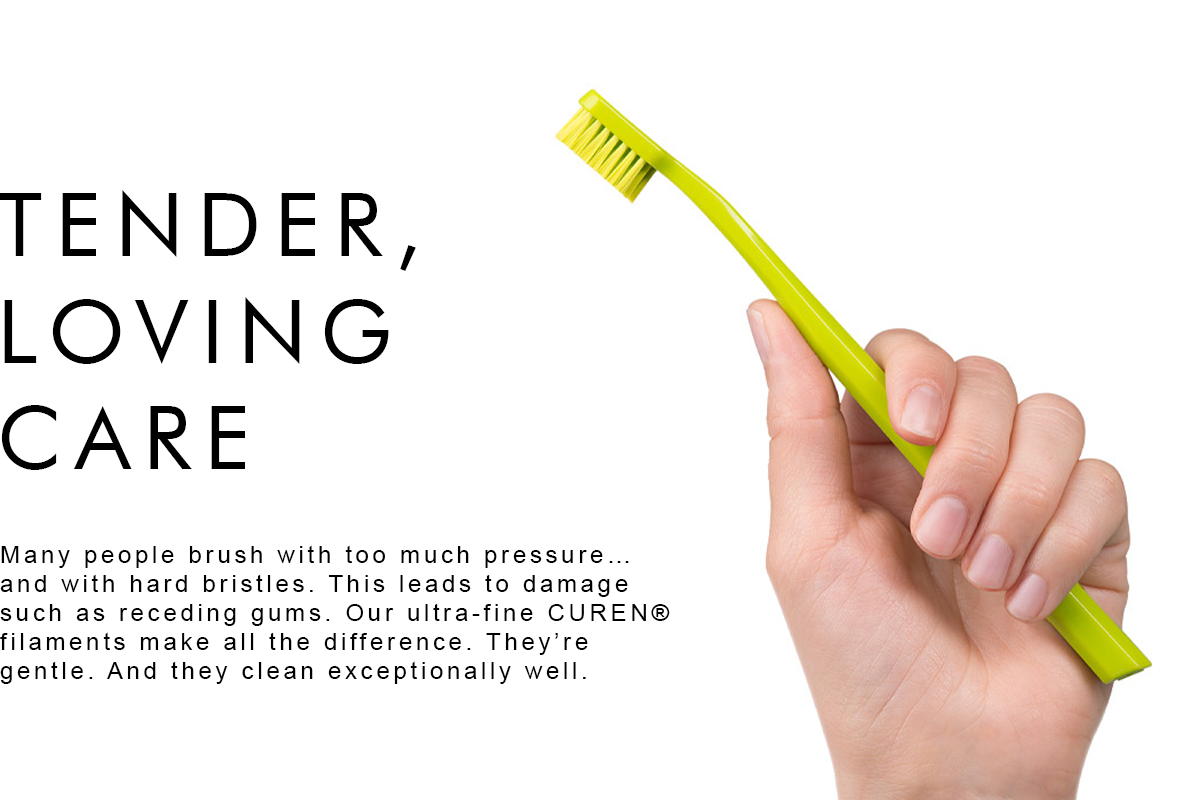
<style>
.page{position:relative;width:1200px;height:800px;background:#ffffff}
.page>*{position:absolute;margin:0}
.t1{font:24.2px "ArialMT";letter-spacing:0.15em;color:#000000}
</style>
<div class="page">
<p class="t1" style="left:0px;top:545px;width:670px;height:139px">Many people brush with too much pressure…<br>and with hard bristles. This leads to damage<br>such as receding gums. Our ultra-fine CUREN®<br>filaments make all the difference. They’re<br>gentle. And they clean exceptionally well.</p>
</div>
